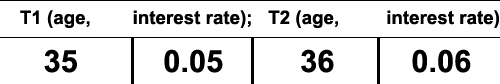
<style>
.page{position:relative;width:500px;height:84px;background:#ffffff}
.page>*{position:absolute;margin:0}
.t1{font:18.8px "Arial-BoldMT";color:#000000}
.t2{font:30.8px "Arial-BoldMT";color:#000000}
</style>
<div class="page">
<p class="t1" style="left:20px;top:10px;width:479px;height:18px">T1 (age,        interest rate);   T2 (age,         interest rate)</p>
<p class="t2" style="left:44px;top:49px;width:427px;height:24px">35          0.05         36         0.06</p>
</div>
